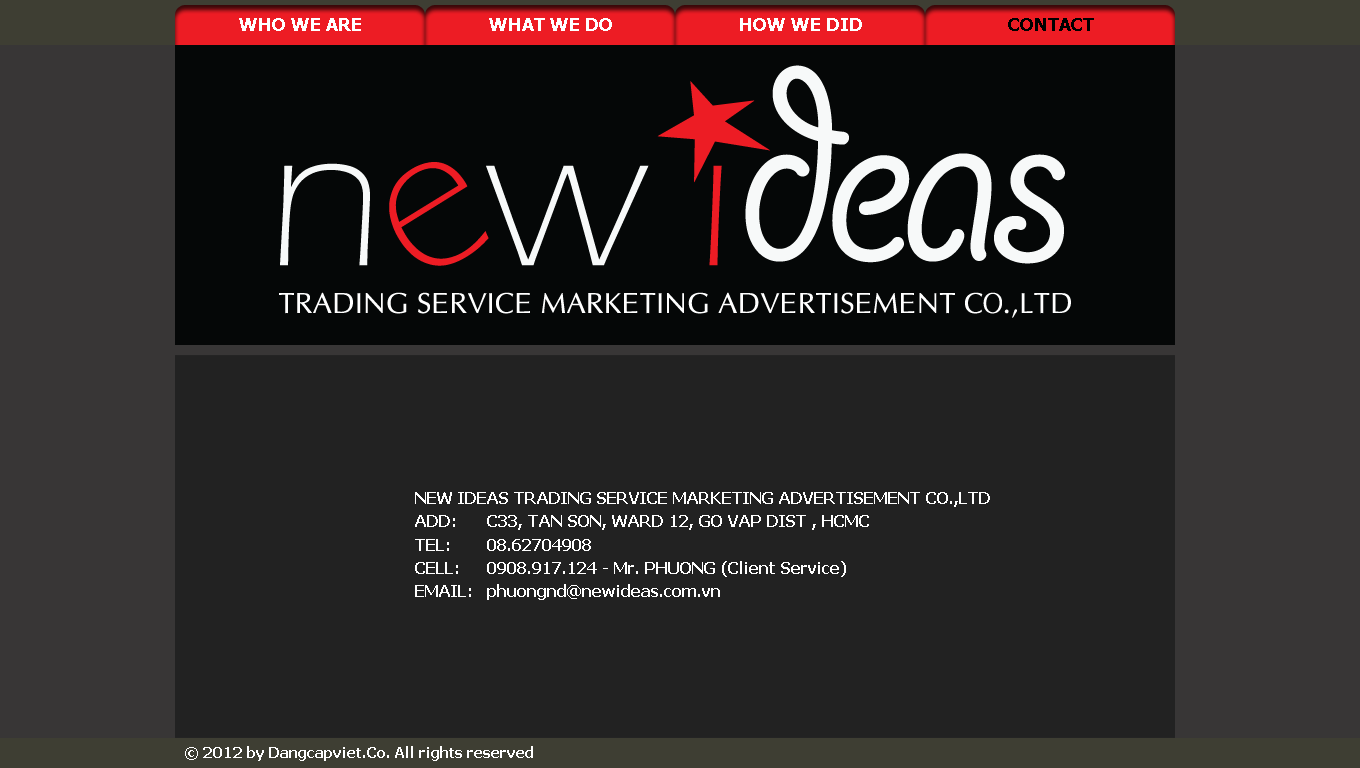
<style>
.page{position:relative;width:1360px;height:768px;background:#222222}
.page>*{position:absolute;margin:0}
.t1{font:18px "Tahoma-Bold";color:#ffffff}
.t2{font:18px "Tahoma-Bold";color:#000000}
.t3{font:16px "Tahoma-Bold";color:#ffffff}
.t4{font:15px "Tahoma-Bold";color:#ffffff}
</style>
<div class="page">
<p class="t1" style="left:239px;top:18px;width:122px;height:13px">WHO WE ARE</p>
<p class="t1" style="left:489px;top:18px;width:123px;height:13px">WHAT WE DO</p>
<p class="t1" style="left:740px;top:18px;width:122px;height:13px">HOW WE DID</p>
<p class="t2" style="left:1008px;top:18px;width:86px;height:13px">CONTACT</p>
<p class="t3" style="left:415px;top:492px;width:575px;height:108px">NEW IDEAS TRADING SERVICE MARKETING ADVERTISEMENT CO.,LTD<br>ADD:  C33, TAN SON, WARD 12, GO VAP DIST , HCMC<br>TEL: 08.62704908<br>CELL:  0908.917.124 - Mr. PHUONG (Client Service)<br>EMAIL:  phuongnd@newideas.com.vn</p>
<p class="t4" style="left:185px;top:746px;width:348px;height:15px">© 2012 by Dangcapviet.Co. All rights reserved</p>
</div>
